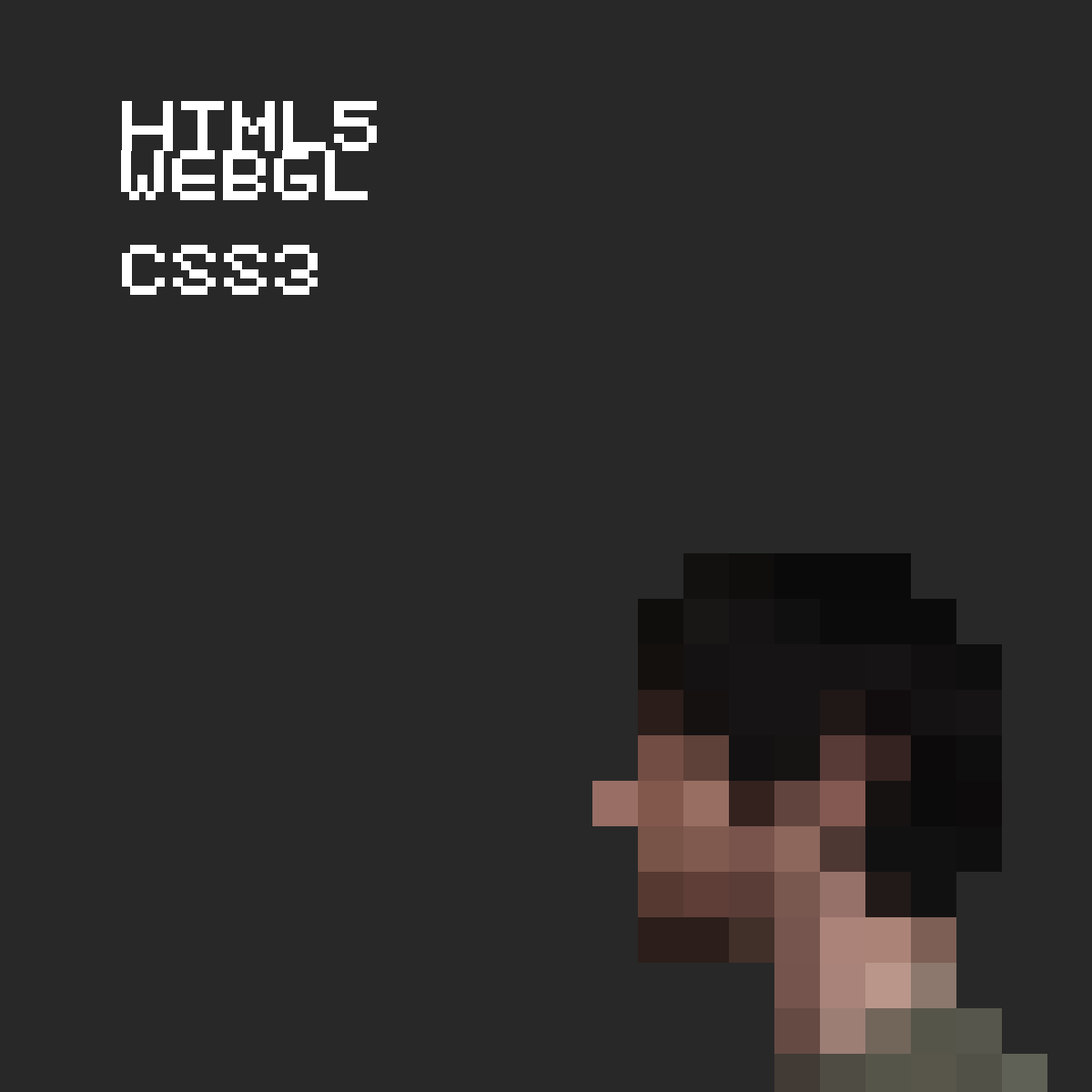
<style>
.page{position:relative;width:1092px;height:1092px;background:#282828}
.page>*{position:absolute;margin:0}
.t1{font:65.5px "8pxbus";color:#ffffff;font-weight:bold}
</style>
<div class="page">
<p class="t1" style="left:122px;top:101px;width:255px;height:50px">HTML5</p>
<p class="t1" style="left:121px;top:150px;width:247px;height:50px">WEBGL</p>
<p class="t1" style="left:122px;top:245px;width:196px;height:50px">CSS3</p>
</div>
